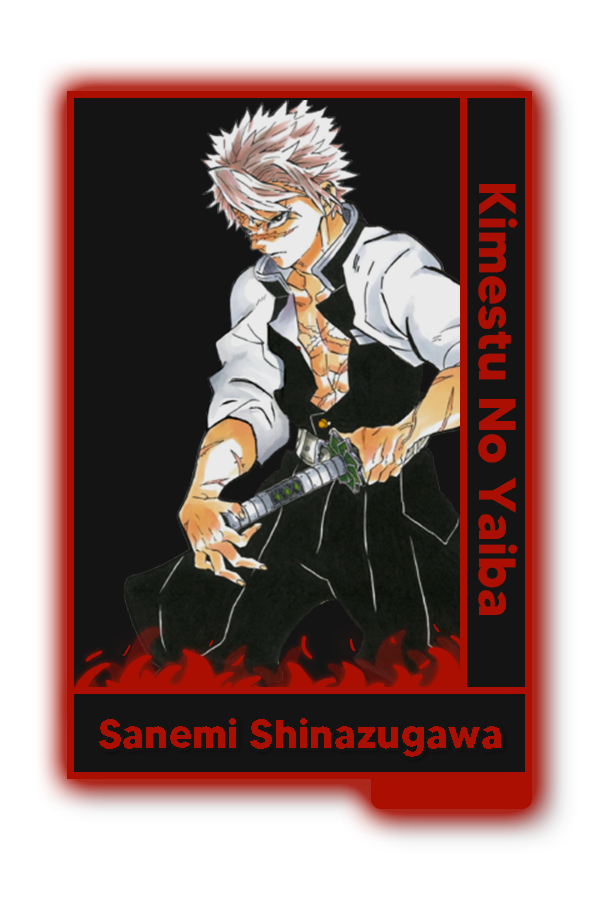
<style>
.page{position:relative;width:600px;height:900px;background:#141414}
.page>*{position:absolute;margin:0}
.t1{font:52px "MADETOMMY-Bold";color:#ab0f01}
.t2{font:40.6px "MADETOMMY-Bold";color:#ab0f01}
</style>
<div class="page">
<p class="t1" style="left:478px;top:184px;width:40px;height:431px;rotate:90deg">Kimestu No Yaiba</p>
<p class="t2" style="left:99px;top:718px;width:402px;height:39px">Sanemi Shinazugawa</p>
</div>
